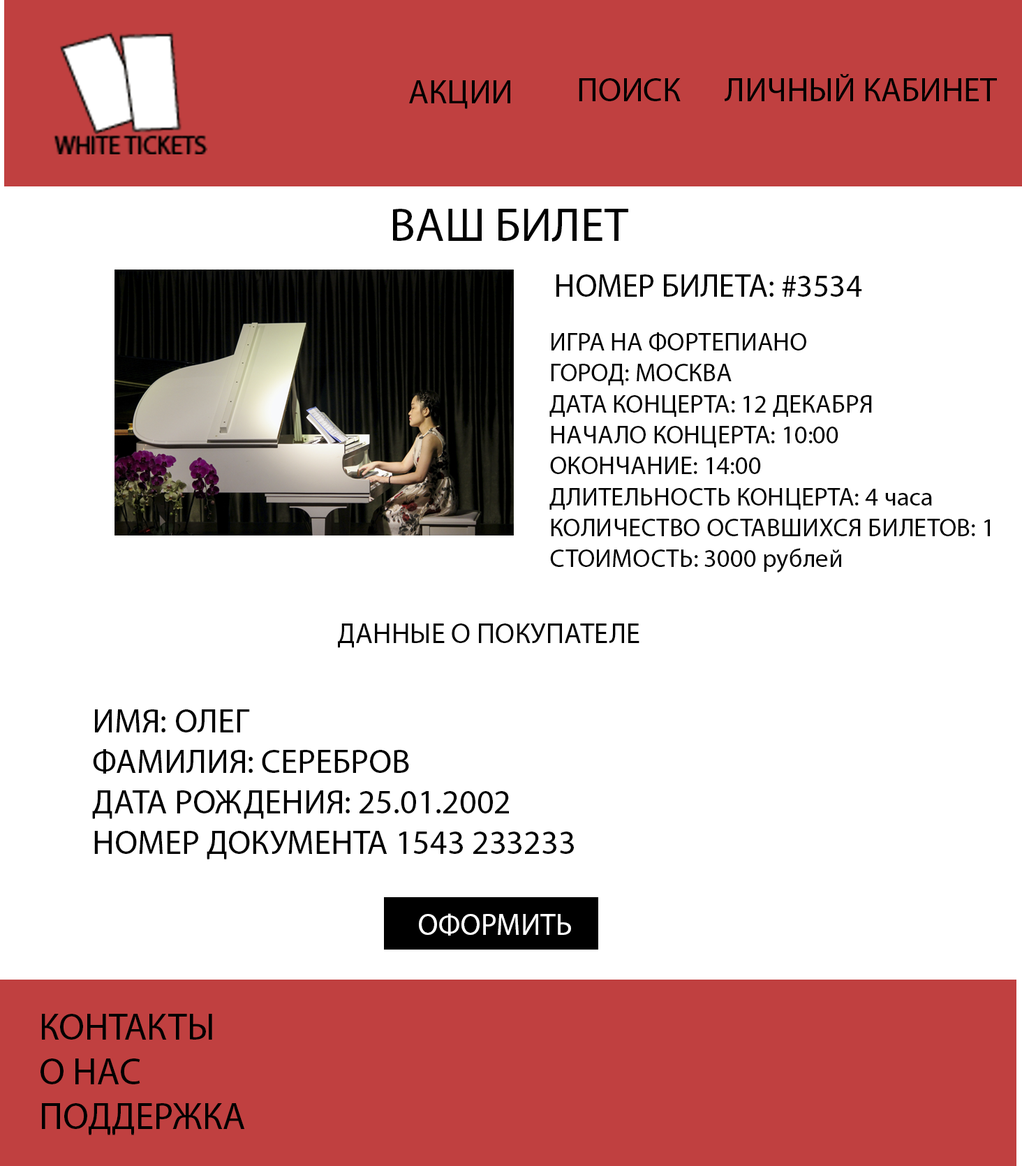
<style>
.page{position:relative;width:1022px;height:1166px;background:#ffffff}
.page>*{position:absolute;margin:0}
.t1{font:33.4px "MyriadPro-Regular";color:#000000}
.t2{font:47.5px "MyriadPro-Regular";color:#000000}
.t3{font:32.1px "MyriadPro-Regular";color:#000000}
.t4{font:25.8px "MyriadPro-Regular";color:#000000}
.t5{font:28.3px "MyriadPro-Regular";color:#000000}
.t6{font:33.8px "MyriadPro-Regular";color:#000000}
.t7{font:30.2px "MyriadPro-Regular";color:#ffffff}
.t8{font:37.3px "MyriadPro-Regular";color:#000000}
</style>
<div class="page">
<p class="t1" style="left:724px;top:74px;width:273px;height:27px">ЛИЧНЫЙ КАБИНЕТ</p>
<p class="t1" style="left:409px;top:80px;width:102px;height:29px">АКЦИИ</p>
<p class="t1" style="left:579px;top:78px;width:102px;height:23px">ПОИСК</p>
<p class="t2" style="left:393px;top:209px;width:236px;height:33px">ВАШ БИЛЕТ</p>
<p class="t3" style="left:557px;top:274px;width:305px;height:23px">НОМЕР БИЛЕТА: #3534</p>
<p class="t4" style="left:550px;top:332px;width:440px;height:241px">ИГРА НА ФОРТЕПИАНО<br>ГОРОД: МОСКВА<br>ДАТА КОНЦЕРТА: 12 ДЕКАБРЯ<br>НАЧАЛО КОНЦЕРТА: 10:00<br>ОКОНЧАНИЕ: 14:00<br>ДЛИТЕЛЬНОСТЬ КОНЦЕРТА: 4 часа<br>КОЛИЧЕСТВО ОСТАВШИХСЯ БИЛЕТОВ: 1<br>СТОИМОСТЬ: 3000 рублей</p>
<p class="t5" style="left:338px;top:624px;width:302px;height:24px">ДАННЫЕ О ПОКУПАТЕЛЕ</p>
<p class="t6" style="left:92px;top:710px;width:482px;height:150px">ИМЯ: ОЛЕГ<br>ФАМИЛИЯ: СЕРЕБРОВ<br>ДАТА РОЖДЕНИЯ: 25.01.2002<br>НОМЕР ДОКУМЕНТА 1543 233233</p>
<p class="t7" style="left:419px;top:913px;width:152px;height:23px">ОФОРМИТЬ</p>
<p class="t8" style="left:41px;top:1014px;width:204px;height:122px">КОНТАКТЫ<br>О НАС<br>ПОДДЕРЖКА</p>
</div>
